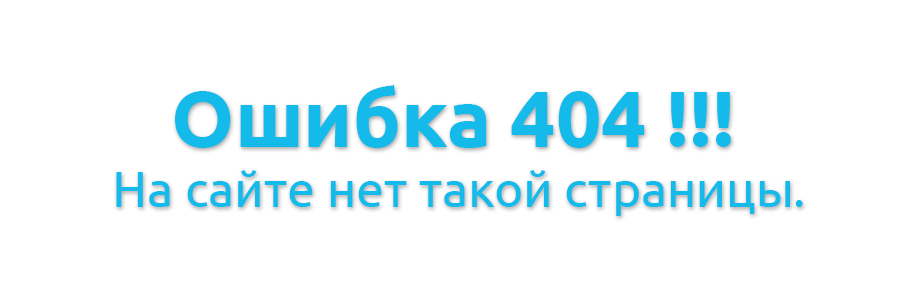
<style>
.page{position:relative;width:920px;height:300px;background:#ffffff}
.page>*{position:absolute;margin:0}
.t1{font:50px "Ubuntu";color:#14bbea}
.t2{font:80px "Ubuntu-Bold";color:#14bbea}
</style>
<div class="page">
<p class="t1" style="left:116px;top:85px;width:687px;height:131px;text-align:center"><span class="t2">Ошибка 404 !!! <br></span>На сайте нет такой страницы.</p>
</div>
